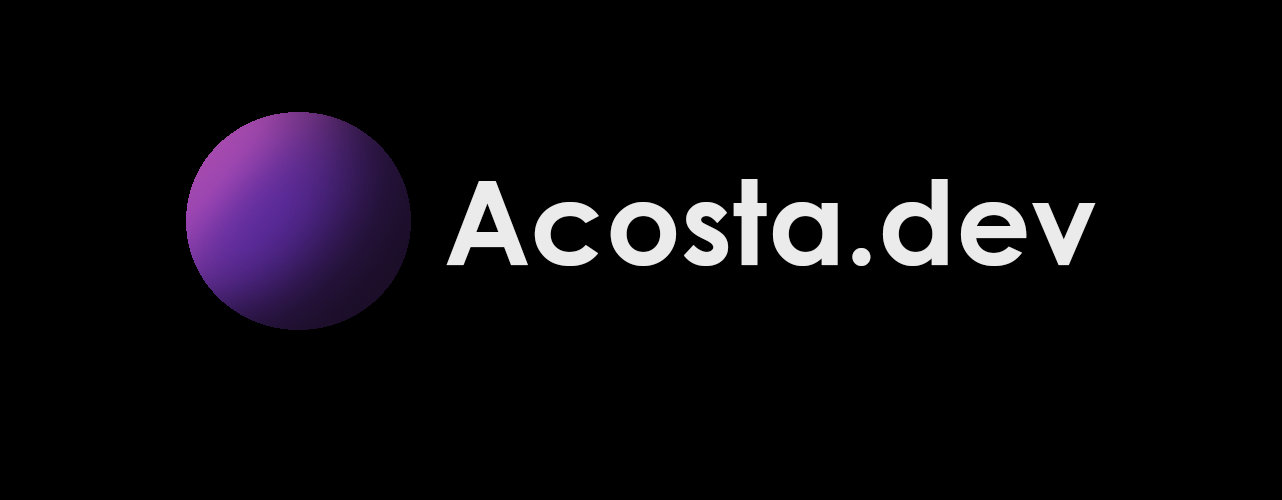
<style>
.page{position:relative;width:1282px;height:500px;background:#000000}
.page>*{position:absolute;margin:0}
.t1{font:117.4px "CenturyGothic-Bold";color:#ffffff}
</style>
<div class="page">
<p class="t1" style="left:446px;top:179px;width:650px;height:87px;opacity:0.88">Acosta.dev</p>
</div>
